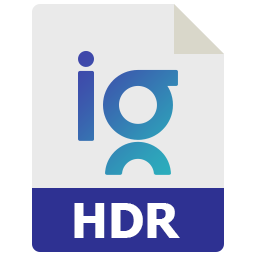
<style>
.page{position:relative;width:256px;height:256px;background:#eaeaea}
.page>*{position:absolute;margin:0}
.t1{font:48px "Tahoma-Bold";color:#ffffff}
</style>
<div class="page">
<p class="t1" style="left:74px;top:203px;width:106px;height:35px">HDR</p>
</div>
